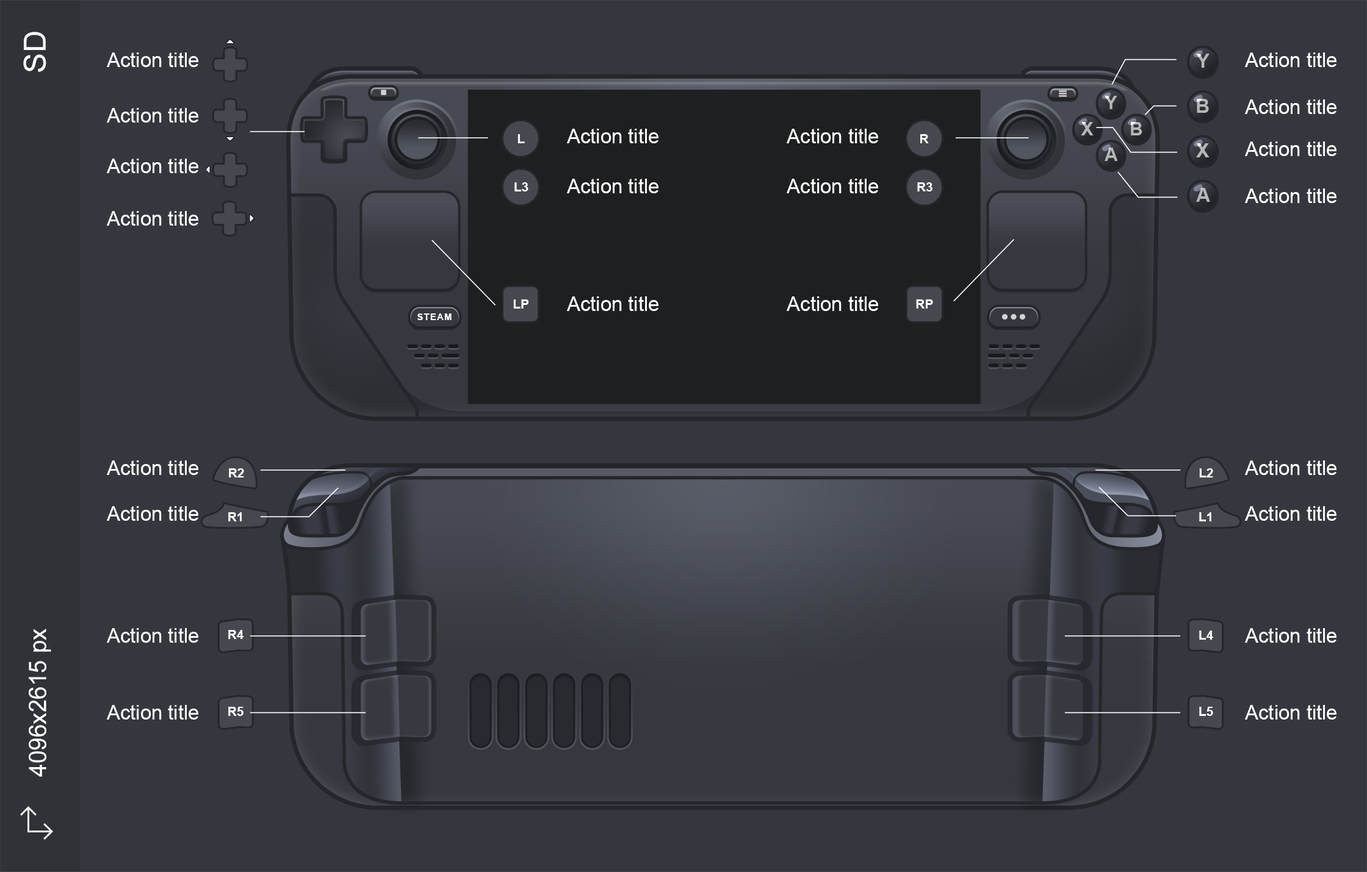
<style>
.page{position:relative;width:1367px;height:872px;background:#35373e}
.page>*{position:absolute;margin:0}
.t1{font:30.5px "ArialMT";color:#ffffff}
.t2{font:20px "ArialMT";color:#ffffff}
.t3{font:19.5px "Arial-BoldMT";color:#b6b6b6}
.t4{font:18.7px "Arial-BoldMT";color:#b6b6b6}
.t5{font:12.8px "Arial-BoldMT";color:#ffffff}
.t6{font:9.2px "Arial-BoldMT";letter-spacing:0.08em;color:#ffffff}
.t7{font:12.7px "Arial-BoldMT";color:#ffffff}
.t8{font:12.6px "Arial-BoldMT";color:#ffffff}
.t9{font:23.9px "ArialMT";color:#ffffff}
</style>
<div class="page">
<p class="t1" style="left:23px;top:32px;width:23px;height:40px;rotate:-90deg">SD</p>
<p class="t2" style="left:107px;top:52px;width:91px;height:15px">Action title</p>
<p class="t3" style="left:1196px;top:54px;width:13px;height:14px">Y</p>
<p class="t2" style="left:1245px;top:52px;width:91px;height:15px">Action title</p>
<p class="t4" style="left:1104px;top:96px;width:13px;height:13px">Y</p>
<p class="t3" style="left:1196px;top:99px;width:13px;height:14px">B</p>
<p class="t2" style="left:1245px;top:99px;width:91px;height:15px">Action title</p>
<p class="t2" style="left:107px;top:108px;width:91px;height:15px">Action title</p>
<p class="t4" style="left:1081px;top:122px;width:12px;height:13px">X</p>
<p class="t4" style="left:1131px;top:122px;width:11px;height:13px">B</p>
<p class="t5" style="left:517px;top:134px;width:8px;height:9px">L</p>
<p class="t2" style="left:567px;top:129px;width:91px;height:14px">Action title</p>
<p class="t2" style="left:786px;top:129px;width:92px;height:14px">Action title</p>
<p class="t5" style="left:920px;top:134px;width:9px;height:9px">R</p>
<p class="t4" style="left:1104px;top:148px;width:14px;height:13px">A</p>
<p class="t3" style="left:1196px;top:143px;width:13px;height:14px">X</p>
<p class="t2" style="left:1245px;top:142px;width:91px;height:14px">Action title</p>
<p class="t2" style="left:107px;top:159px;width:91px;height:14px">Action title</p>
<p class="t5" style="left:514px;top:182px;width:14px;height:10px">L3</p>
<p class="t2" style="left:567px;top:179px;width:91px;height:14px">Action title</p>
<p class="t2" style="left:786px;top:179px;width:92px;height:14px">Action title</p>
<p class="t5" style="left:917px;top:182px;width:15px;height:10px">R3</p>
<p class="t3" style="left:1196px;top:188px;width:14px;height:14px">A</p>
<p class="t2" style="left:1245px;top:189px;width:91px;height:14px">Action title</p>
<p class="t2" style="left:107px;top:211px;width:91px;height:15px">Action title</p>
<p class="t5" style="left:513px;top:300px;width:15px;height:9px">LP</p>
<p class="t2" style="left:567px;top:297px;width:91px;height:14px">Action title</p>
<p class="t2" style="left:786px;top:297px;width:92px;height:14px">Action title</p>
<p class="t5" style="left:916px;top:300px;width:17px;height:9px">RP</p>
<p class="t6" style="left:417px;top:314px;width:34px;height:6px">STEAM</p>
<p class="t2" style="left:107px;top:461px;width:91px;height:14px">Action title</p>
<p class="t2" style="left:1245px;top:461px;width:91px;height:14px">Action title</p>
<p class="t7" style="left:229px;top:469px;width:15px;height:9px">R2</p>
<p class="t7" style="left:1199px;top:469px;width:14px;height:9px">L2</p>
<p class="t2" style="left:107px;top:506px;width:91px;height:15px">Action title</p>
<p class="t2" style="left:1245px;top:506px;width:91px;height:15px">Action title</p>
<p class="t8" style="left:228px;top:513px;width:14px;height:9px">R1</p>
<p class="t8" style="left:1199px;top:513px;width:12px;height:9px">L1</p>
<p class="t9" style="left:29px;top:629px;width:22px;height:148px;rotate:-90deg">4096x2615 px</p>
<p class="t2" style="left:107px;top:628px;width:91px;height:15px">Action title</p>
<p class="t2" style="left:1245px;top:628px;width:91px;height:15px">Action title</p>
<p class="t8" style="left:228px;top:630px;width:15px;height:9px">R4</p>
<p class="t8" style="left:1199px;top:631px;width:14px;height:9px">L4</p>
<p class="t2" style="left:107px;top:705px;width:91px;height:15px">Action title</p>
<p class="t8" style="left:228px;top:707px;width:15px;height:9px">R5</p>
<p class="t8" style="left:1199px;top:707px;width:14px;height:9px">L5</p>
<p class="t2" style="left:1245px;top:705px;width:91px;height:15px">Action title</p>
</div>
